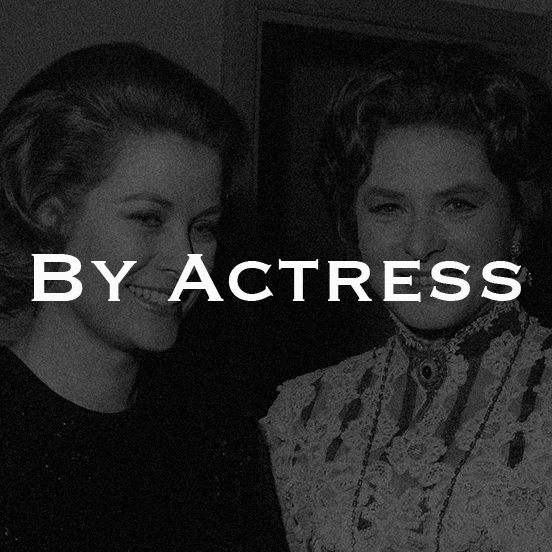
<style>
.page{position:relative;width:552px;height:552px}
.page>*{position:absolute;margin:0}
.t1{font:90px "Copperplate";color:#fbfbfb}
</style>
<div class="page">
<p class="t1" style="left:31px;top:254px;width:491px;height:48px">By Actress</p>
</div>
